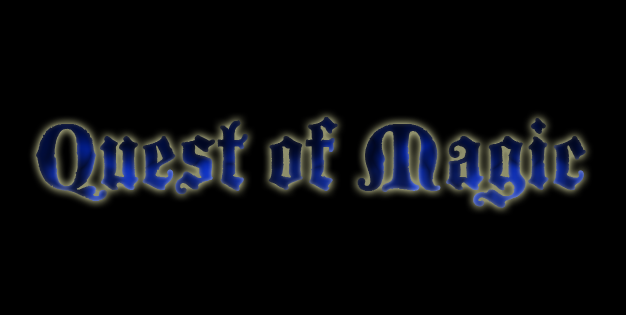
<style>
.page{position:relative;width:626px;height:315px;background:#000000}
.page>*{position:absolute;margin:0}
.t1{font:100px "BlackmoorLetPlain"}
</style>
<div class="page">
<p class="t1" style="left:36px;top:117px;width:550px;height:91px">Quest of Magic</p>
</div>
